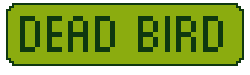
<style>
.page{position:relative;width:250px;height:75px;background:#8bac0f}
.page>*{position:absolute;margin:0}
.t1{font:52px "Munro";letter-spacing:0.025em;color:#0f380f}
</style>
<div class="page">
<p class="t1" style="left:20px;top:16px;width:203px;height:36px">DEAD BIRD</p>
</div>
